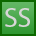
<style>
.page{position:relative;width:36px;height:36px;background:#0c6800}
.page>*{position:absolute;margin:0}
.t1{font:27.3px "MyriadPro-Regular";color:#d7d7d7}
</style>
<div class="page">
<p class="t1" style="left:5px;top:8px;width:25px;height:19px">SS</p>
</div>
